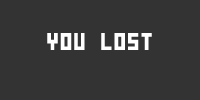
<style>
.page{position:relative;width:200px;height:100px;background:#333333}
.page>*{position:absolute;margin:0}
.t1{font:24px "PixelCyr-Normal";color:#ffffff}
</style>
<div class="page">
<p class="t1" style="left:47px;top:33px;width:105px;height:17px">you lost</p>
</div>
